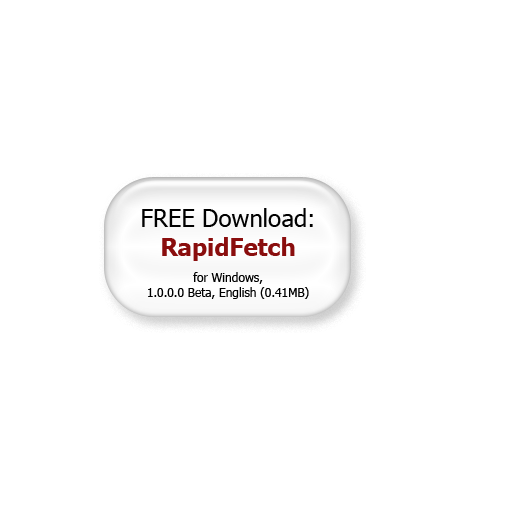
<style>
.page{position:relative;width:512px;height:512px;background:#ffffff}
.page>*{position:absolute;margin:0}
.t1{font:12px "Tahoma";color:#000000}
.t2{font:24px "Tahoma";color:#000000}
.t3{font:24px "Tahoma-Bold";color:#8a0e0e}
</style>
<div class="page">
<p class="t1" style="left:142px;top:208px;width:171px;height:91px;text-align:center"><span class="t2">FREE Download:<br></span><span class="t3">RapidFetch<br> <br></span>for Windows,<br>1.0.0.0 Beta, English (0.41MB)</p>
</div>
